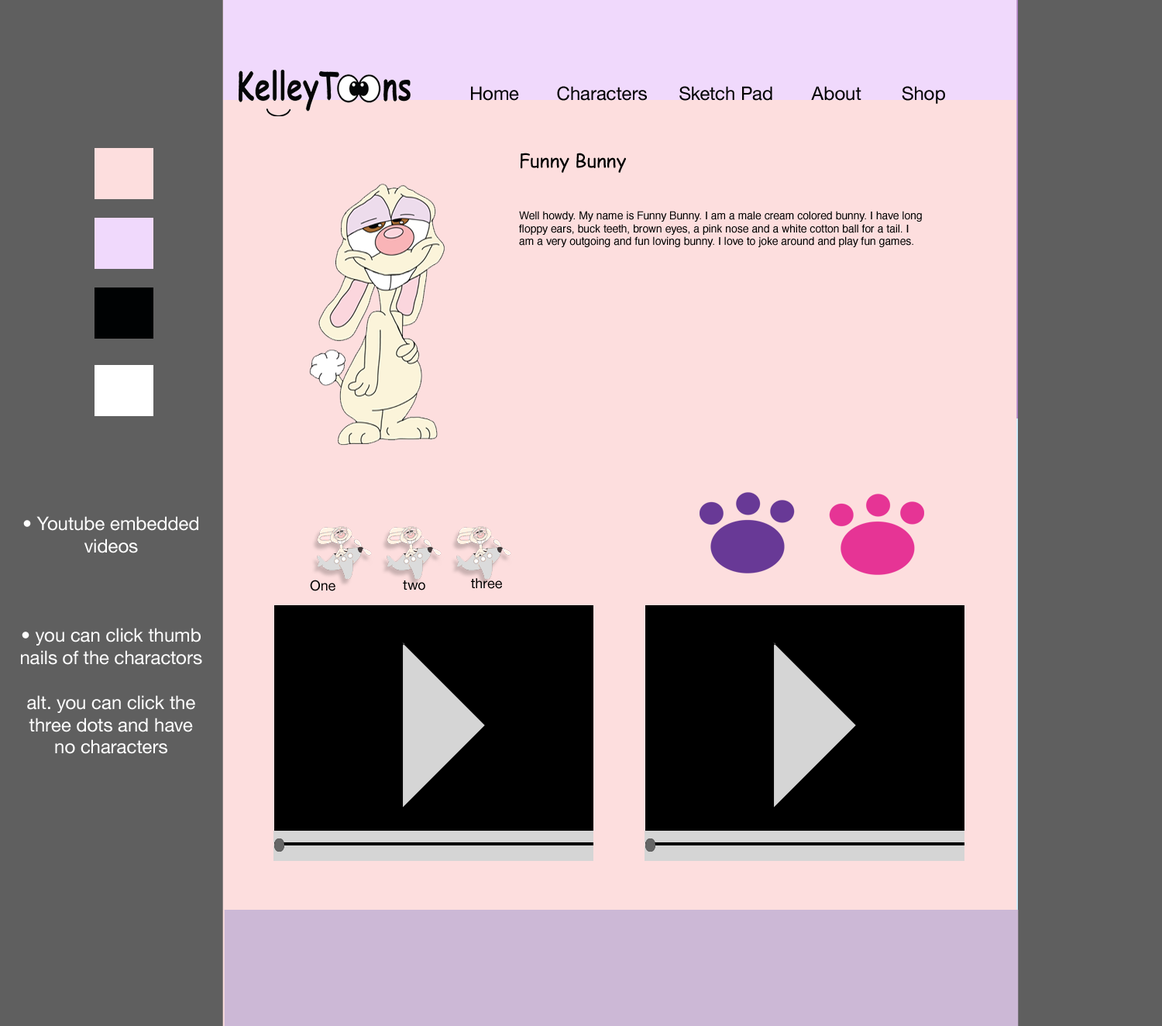
<style>
.page{position:relative;width:1162px;height:1026px;background:#fddede}
.page>*{position:absolute;margin:0}
.t1{font:18.6px "HelveticaNeue";color:#000000}
.t2{font:10.8px "Helvetica";color:#000000}
.t3{font:18.6px "ComicSansMS";color:#000000}
.t4{font:18.6px "HelveticaNeue";color:#ffffff}
.t5{font:13.9px "HelveticaNeue";color:#000000}
</style>
<div class="page">
<p class="t1" style="left:471px;top:86px;width:48px;height:15px">Home</p>
<p class="t1" style="left:557px;top:86px;width:90px;height:15px">Characters</p>
<p class="t1" style="left:680px;top:86px;width:93px;height:15px">Sketch Pad</p>
<p class="t1" style="left:811px;top:86px;width:51px;height:15px">About</p>
<p class="t1" style="left:902px;top:86px;width:43px;height:18px">Shop</p>
<p class="t2" style="left:519px;top:153px;width:403px;height:94px"><span class="t3">Funny Bunny<br><br><br></span>Well howdy. My name is Funny Bunny. I am a male cream colored bunny. I have long floppy ears, buck teeth, brown eyes, a pink nose and a white cotton ball for a tail. I am a very outgoing and fun loving bunny. I love to joke around and play fun games.</p>
<p class="t4" style="left:21px;top:516px;width:181px;height:238px;text-align:center">• Youtube embedded videos<br><br><br><br>• you can click thumb nails of the charactors <br><br>alt. you can click the three dots and have no characters</p>
<p class="t5" style="left:310px;top:580px;width:26px;height:11px">One</p>
<p class="t5" style="left:403px;top:580px;width:22px;height:10px">two</p>
<p class="t5" style="left:471px;top:578px;width:31px;height:11px">three</p>
</div>
